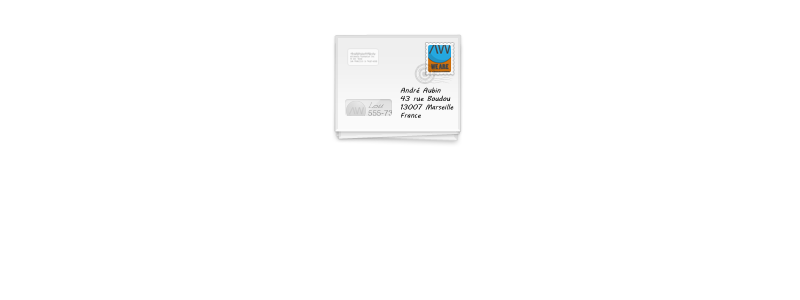
<style>
.page{position:relative;width:800px;height:300px;background:#ffffff}
.page>*{position:absolute;margin:0}
.t1{font:7px "MVBoli";color:#000000}
.t2{font:8px/8px "Helvetica"}
.t3{font:8px/8px "Handwriting-Dakota"}
</style>
<div class="page">
<p class="t1" style="left:400px;top:87px;width:54px;height:31px">André Aubin<br>43 rue Boudou<br>13007 Marseille<br>France</p>
<p class="t2" style="left:368px;top:102px;width:32px;height:14px"><span class="t3">Lou<br></span>555-7361</p>
</div>
